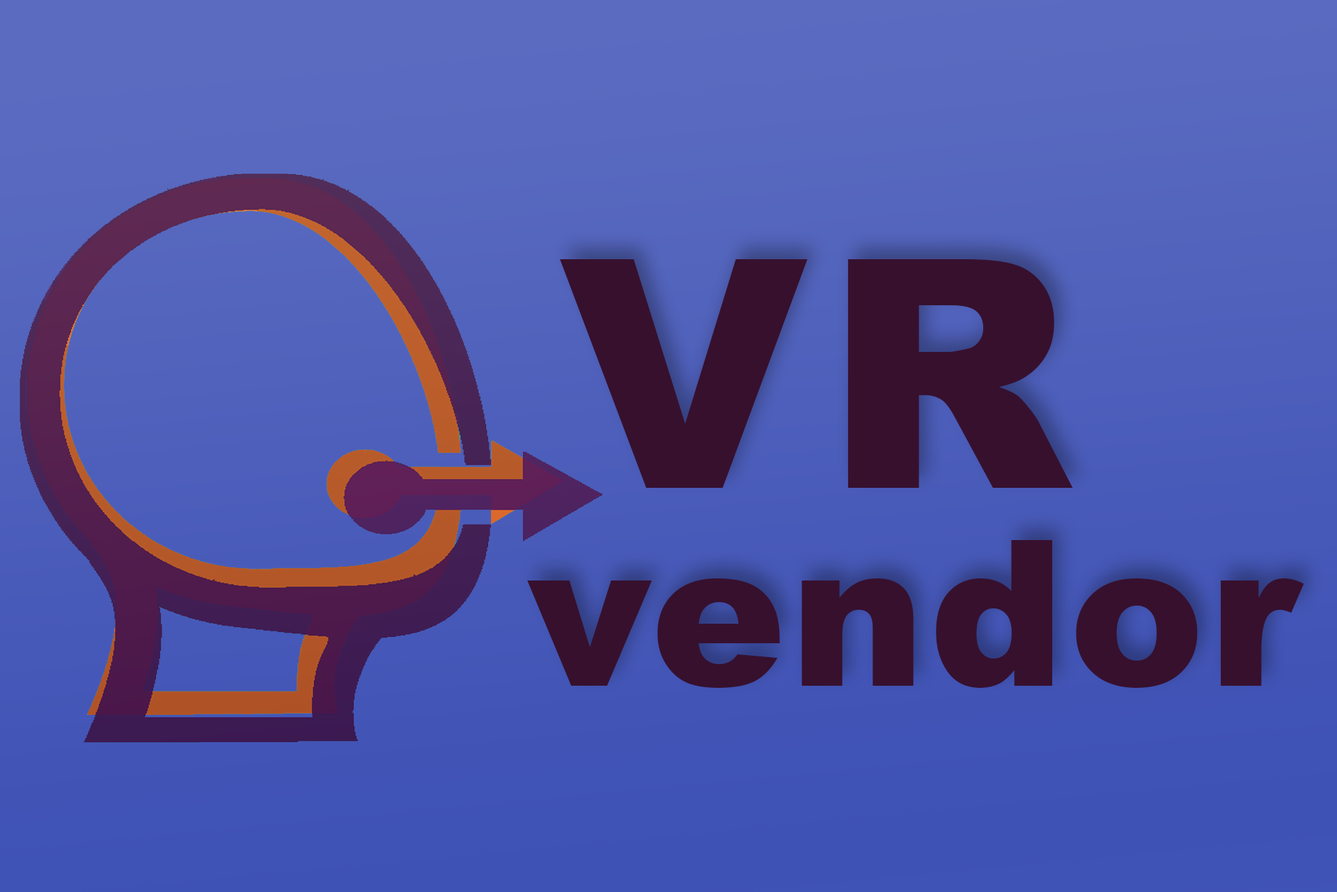
<style>
.page{position:relative;width:1337px;height:892px}
.page>*{position:absolute;margin:0}
.t1{font:319.3px "Arial-Black";letter-spacing:0.05em;color:#37102e}
.t2{font:203.2px "Arial-Black";letter-spacing:0.02em;color:#37102e}
</style>
<div class="page">
<p class="t1" style="left:560px;top:259px;width:513px;height:229px">VR</p>
<p class="t2" style="left:527px;top:540px;width:778px;height:148px">vendor</p>
</div>
